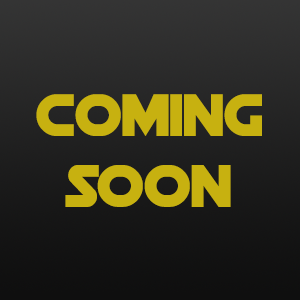
<style>
.page{position:relative;width:300px;height:300px}
.page>*{position:absolute;margin:0}
.t1{font:59px "DeathStar";letter-spacing:0.01em;color:#c7b110}
</style>
<div class="page">
<p class="t1" style="left:36px;top:94px;width:226px;height:113px;text-align:center">COMING<br>SOON</p>
</div>
